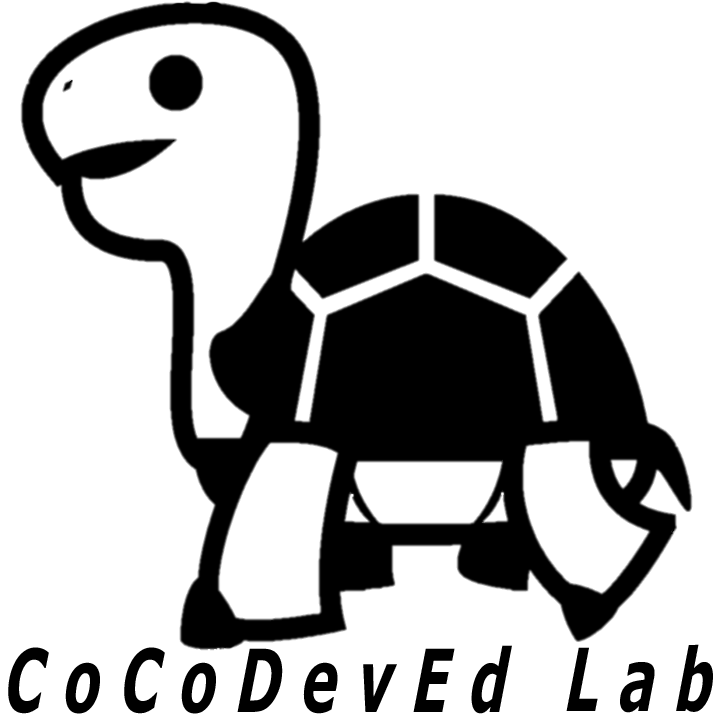
<style>
.page{position:relative;width:720px;height:720px;background:#ffffff}
.page>*{position:absolute;margin:0}
.t1{font:87.1px "Verdana-BoldItalic";letter-spacing:0.36em;color:#000000;scale:0.63 1}
</style>
<div class="page">
<p class="t1" style="left:8px;top:644px;width:705px;height:70px">CoCoDevEd Lab</p>
</div>
